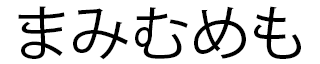
<style>
.page{position:relative;width:320px;height:64px;background:#ffffff}
.page>*{position:absolute;margin:0}
.t1{font:60px "KozGoPr6N-Regular";color:#000000}
</style>
<div class="page">
<p class="t1" style="left:18px;top:6px;width:283px;height:54px">まみむめも</p>
</div>
